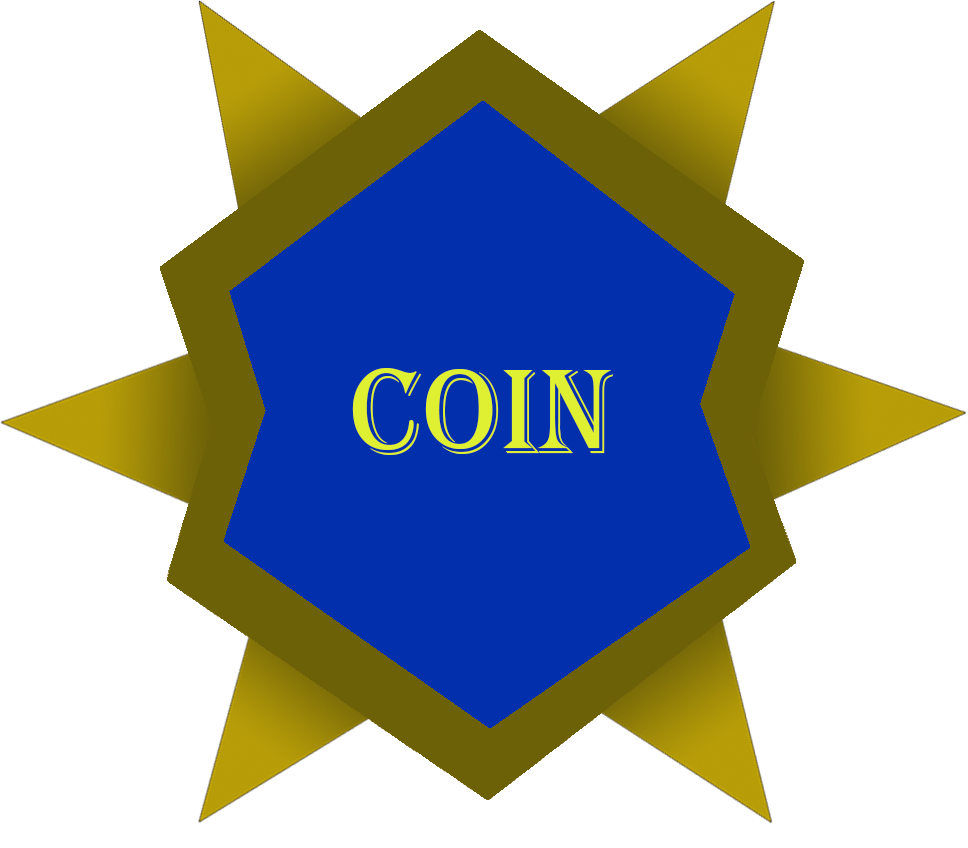
<style>
.page{position:relative;width:968px;height:848px;background:#ffffff}
.page>*{position:absolute;margin:0}
.t1{font:125px "Algerian";color:#dfef31}
</style>
<div class="page">
<p class="t1" style="left:352px;top:368px;width:262px;height:87px">coin</p>
</div>
